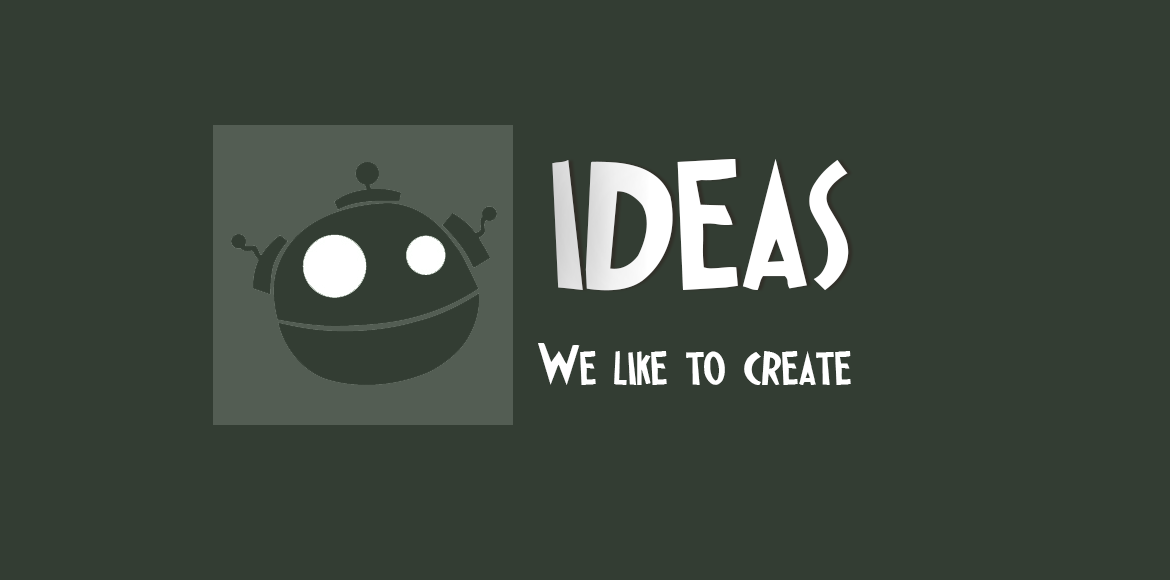
<style>
.page{position:relative;width:1170px;height:580px;background:#333d33}
.page>*{position:absolute;margin:0}
.t1{font:233px "IpkissZF";color:#ffffff}
.t2{font:60px "IpkissZF";color:#ffffff}
</style>
<div class="page">
<p class="t1" style="left:552px;top:159px;width:297px;height:132px">ideas</p>
<p class="t2" style="left:538px;top:343px;width:313px;height:42px">We like to create</p>
</div>
